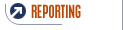
<style>
.page{position:relative;width:123px;height:30px;background:#ffffff}
.page>*{position:absolute;margin:0}
.t1{font:16px "PlacardMT-Condensed";color:#bd4701}
</style>
<div class="page">
<p class="t1" style="left:31px;top:4px;width:50px;height:14px">REPORTING</p>
</div>
